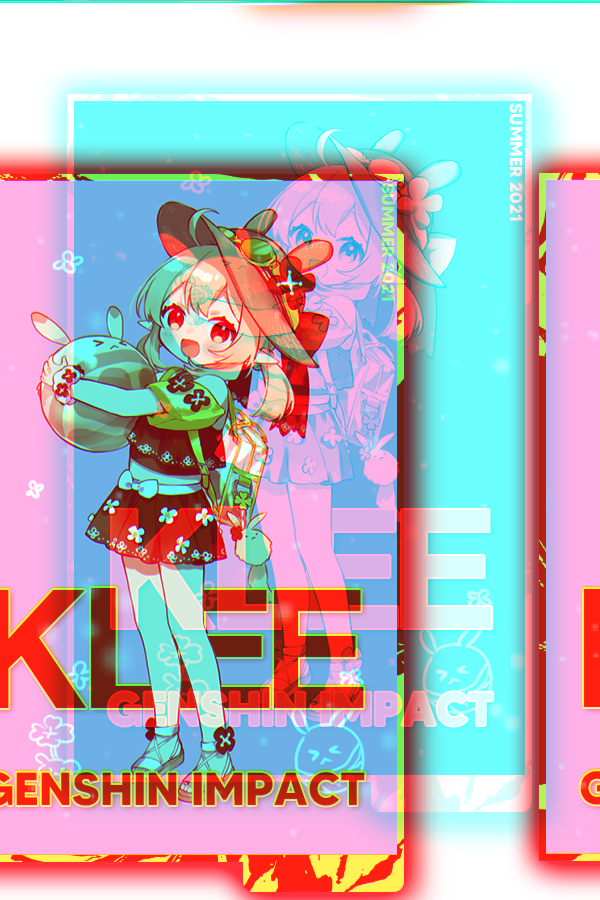
<style>
.page{position:relative;width:600px;height:900px}
.page>*{position:absolute;margin:0}
.t1{font:177.4px "CoolveticaRg-Regular"}
.t2{font:46.1px "MADETOMMY-Bold"}
</style>
<div class="page">
<p class="t1" style="left:112px;top:505px;width:380px;height:120px">KLEE</p>
<p class="t2" style="left:108px;top:689px;width:385px;height:34px">GENSHIN IMPACT</p>
</div>
